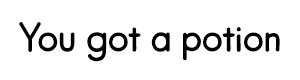
<style>
.page{position:relative;width:300px;height:80px;background:#ffffff}
.page>*{position:absolute;margin:0}
.t1{font:40px "TPBAFK-Regular";color:#000000}
</style>
<div class="page">
<p class="t1" style="left:19px;top:22px;width:261px;height:40px">You got a potion</p>
</div>
